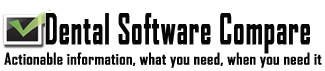
<style>
.page{position:relative;width:325px;height:71px;background:#ffffff}
.page>*{position:absolute;margin:0}
.t1{font:39.5px "AgencyFB-Bold";letter-spacing:0.02em;color:#060606;font-weight:bold;scale:0.69 1}
.t2{font:15.8px "AgencyFB-Bold";letter-spacing:0.02em;color:#060606}
</style>
<div class="page">
<p class="t1" style="left:45px;top:13px;width:265px;height:41px">Dental Software Compare</p>
<p class="t2" style="left:4px;top:52px;width:318px;height:16px">Actionable information, what you need, when you need it</p>
</div>
